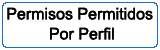
<style>
.page{position:relative;width:160px;height:50px;background:#ffffff}
.page>*{position:absolute;margin:0}
.t1{font:16px "ArialMT";color:#000000}
</style>
<div class="page">
<p class="t1" style="left:7px;top:7px;width:146px;height:13px">Permisos Permitidos</p>
<p class="t1" style="left:7px;top:7px;width:146px;height:13px">Permisos Permitidos</p>
<p class="t1" style="left:50px;top:27px;width:64px;height:13px">Por Perfil</p>
<p class="t1" style="left:50px;top:27px;width:64px;height:13px">Por Perfil</p>
</div>
